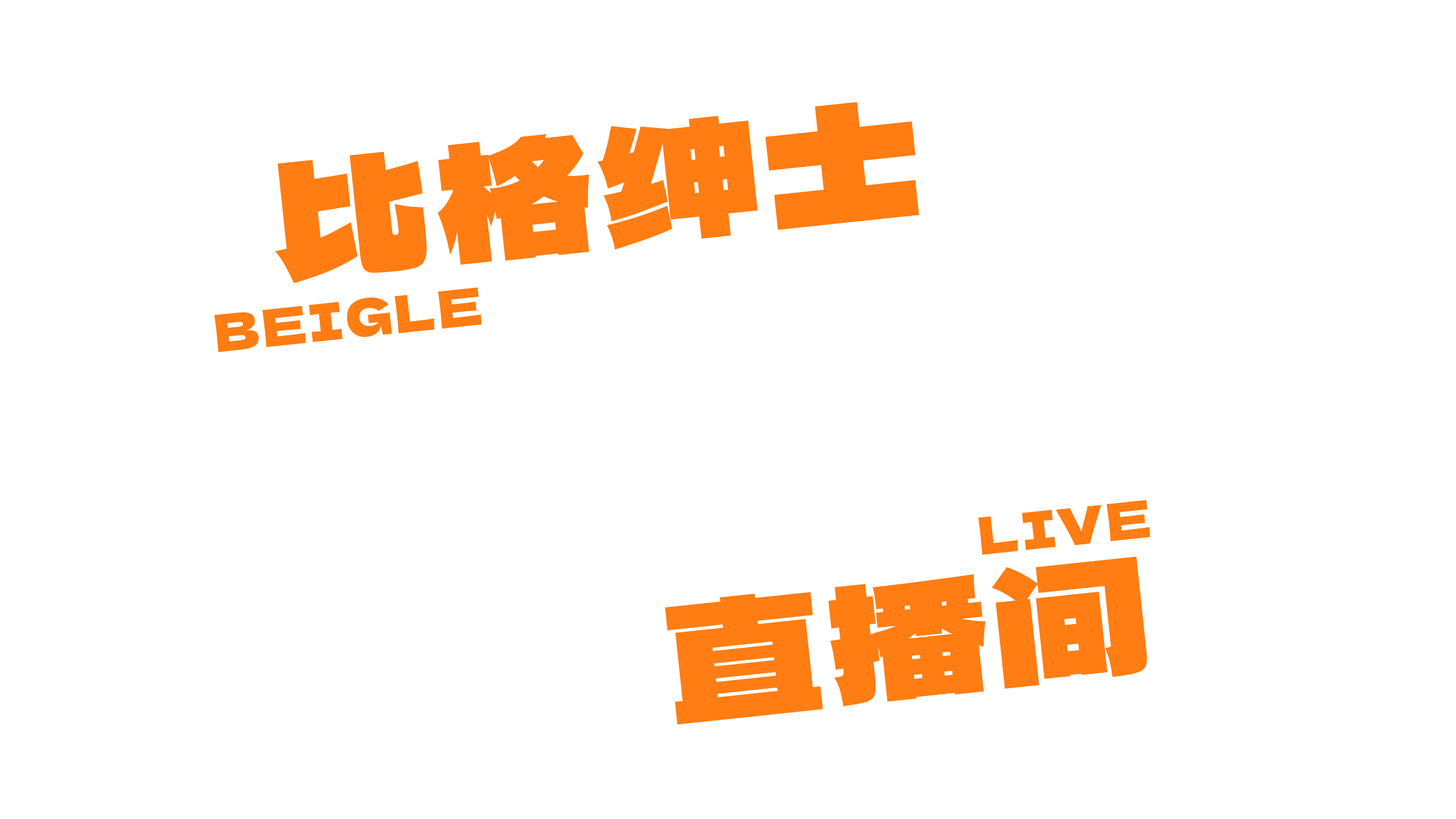
<style>
.page{position:relative;width:1456px;height:819px;background:#ffffff}
.page>*{position:absolute;margin:0}
.t1{font:156.5px "LogoSCUnboundedSans";letter-spacing:0.05em;color:#ff7d13}
.t2{font:51.2px "LogoSCUnboundedSans";letter-spacing:0.05em;color:#ff7d13}
</style>
<div class="page">
<p class="t1" style="left:275px;top:102px;width:644px;height:181px;rotate:-6deg">比格绅士</p>
<p class="t2" style="left:214px;top:287px;width:267px;height:65px;rotate:-6deg">BEIGLE</p>
<p class="t2" style="left:978px;top:500px;width:172px;height:55px;rotate:-6deg">LIVE</p>
<p class="t1" style="left:665px;top:556px;width:482px;height:169px;rotate:-6deg">直播间</p>
</div>
